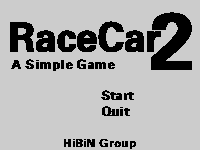
<style>
.page{position:relative;width:200px;height:150px;background:#cccccc}
.page>*{position:absolute;margin:0}
.t1{font:80px "FZZYJW--GB1-0";letter-spacing:-0.04em;color:#000000;font-weight:bold}
.t2{font:40px "FZZYJW--GB1-0";letter-spacing:-0.04em;color:#000000;font-weight:bold}
.t3{font:13.3px "FZZYJW--GB1-0";letter-spacing:-0.04em;color:#000000;font-weight:bold}
.t4{font:13.3px/16px "FZZYJW--GB1-0";letter-spacing:-0.04em;color:#000000;font-weight:bold}
.t5{font:10.7px "FZZYJW--GB1-0";letter-spacing:-0.04em;color:#000000;font-weight:bold}
</style>
<div class="page">
<p class="t1" style="left:151px;top:12px;width:41px;height:58px">2</p>
<p class="t2" style="left:10px;top:21px;width:151px;height:31px">RaceCar</p>
<p class="t3" style="left:11px;top:59px;width:104px;height:12px">A Simple Game</p>
<p class="t4" style="left:101px;top:90px;width:33px;height:26px">Start<br>Quit</p>
<p class="t5" style="left:64px;top:139px;width:72px;height:10px">HiBiN Group</p>
</div>
